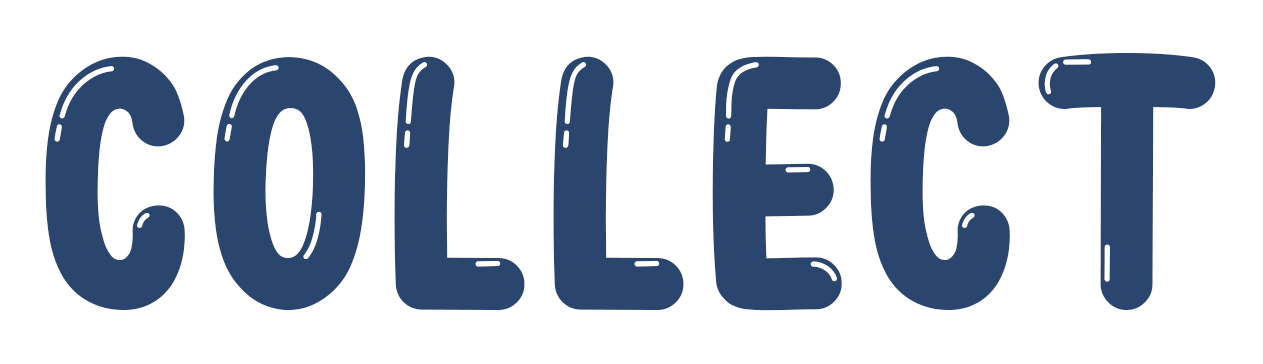
<style>
.page{position:relative;width:1263px;height:364px;background:#ffffff}
.page>*{position:absolute;margin:0}
.t1{font:362.5px "BubbleBobble";color:#2a456e}
</style>
<div class="page">
<p class="t1" style="left:45px;top:53px;width:1171px;height:258px">COLLECT</p>
</div>
